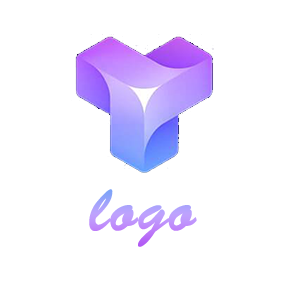
<style>
.page{position:relative;width:285px;height:294px;background:#ffffff}
.page>*{position:absolute;margin:0}
.t1{font:65.3px "BrushScriptStd";color:#be9cfc;font-weight:bold}
</style>
<div class="page">
<p class="t1" style="left:89px;top:189px;width:108px;height:58px">logo</p>
</div>
